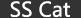
<style>
.page{position:relative;width:81px;height:18px;background:#333333}
.page>*{position:absolute;margin:0}
.t1{font:20px "MicrosoftYaHei";color:#ffffff}
</style>
<div class="page">
<p class="t1" style="left:10px;top:1px;width:60px;height:17px">SS Cat</p>
</div>
